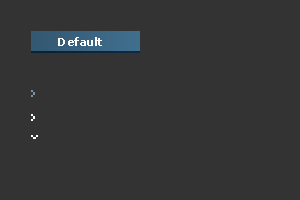
<style>
.page{position:relative;width:300px;height:200px;background:#333333}
.page>*{position:absolute;margin:0}
.t1{font:11px "Verdana-Bold";color:#fffcfc}
</style>
<div class="page">
<p class="t1" style="left:58px;top:37px;width:44px;height:9px">Default</p>
</div>
